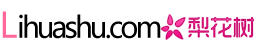
<style>
.page{position:relative;width:259px;height:42px;background:#ffffff}
.page>*{position:absolute;margin:0}
.t1{font:29px "MicrosoftYaHei";letter-spacing:-0.1em;color:#000000}
.t2{font:34.8px "MicrosoftYaHei";color:#ff6699}
</style>
<div class="page">
<p class="t1" style="left:2px;top:11px;width:159px;height:28px"><span class="t2">L</span>ihuashu.com</p>
</div>
